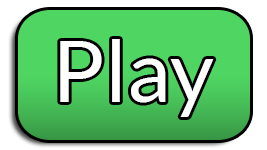
<style>
.page{position:relative;width:267px;height:150px;background:#4fd662}
.page>*{position:absolute;margin:0}
.t1{font:86.4px "Lato-Regular";color:#ffffff}
</style>
<div class="page">
<p class="t1" style="left:60px;top:39px;width:154px;height:78px">Play</p>
</div>
